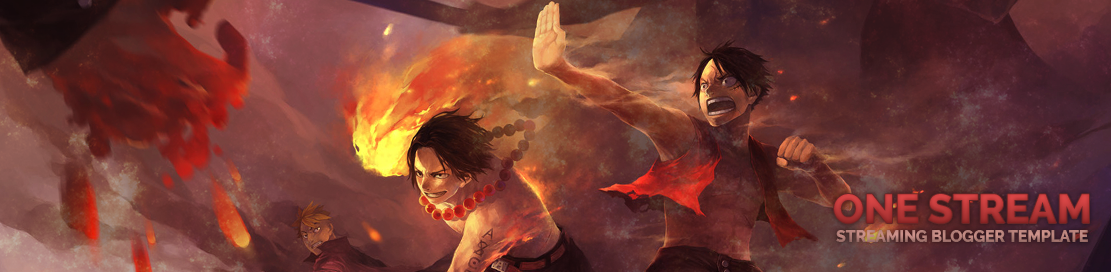
<style>
.page{position:relative;width:1111px;height:272px}
.page>*{position:absolute;margin:0}
.t1{font:40.4px "Raleway-ExtraBold"}
.t2{font:15.7px "Raleway-ExtraBold";color:#b8837c}
</style>
<div class="page">
<p class="t1" style="left:834px;top:194px;width:255px;height:30px">ONE STREAM</p>
<p class="t2" style="left:836px;top:230px;width:252px;height:12px">STREAMING BLOGGER TEMPLATE</p>
</div>
